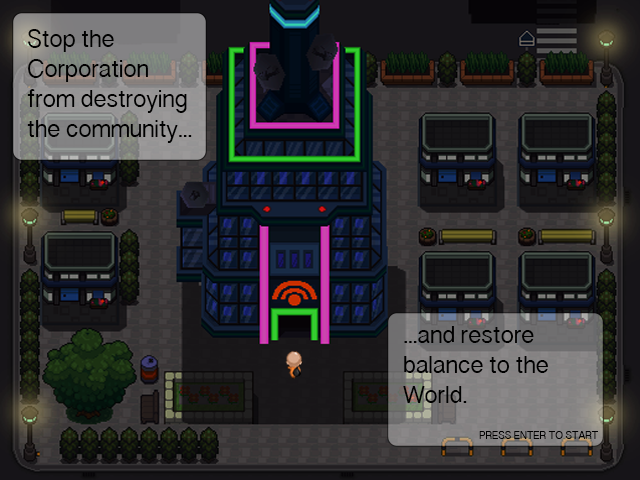
<style>
.page{position:relative;width:640px;height:480px}
.page>*{position:absolute;margin:0}
.t1{font:22.5px/30px "SinhalaSangamMN-Bold";color:#000000}
.t2{font:10px "SinhalaSangamMN-Bold";color:#000000}
</style>
<div class="page">
<p class="t1" style="left:27px;top:29px;width:165px;height:114px">Stop the <br>Corporation<br>from destroying<br>the community...</p>
<p class="t1" style="left:403px;top:326px;width:145px;height:77px">...and restore<br>balance to the <br>World.</p>
<p class="t2" style="left:479px;top:431px;width:119px;height:8px">PRESS ENTER TO START</p>
</div>
